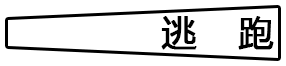
<style>
.page{position:relative;width:286px;height:66px;background:#ffffff}
.page>*{position:absolute;margin:0}
.t1{font:35px "MicrosoftYaHei";letter-spacing:0.06em;color:#000000;font-weight:bold}
</style>
<div class="page">
<p class="t1" style="left:161px;top:16px;width:113px;height:34px">逃　跑</p>
</div>
